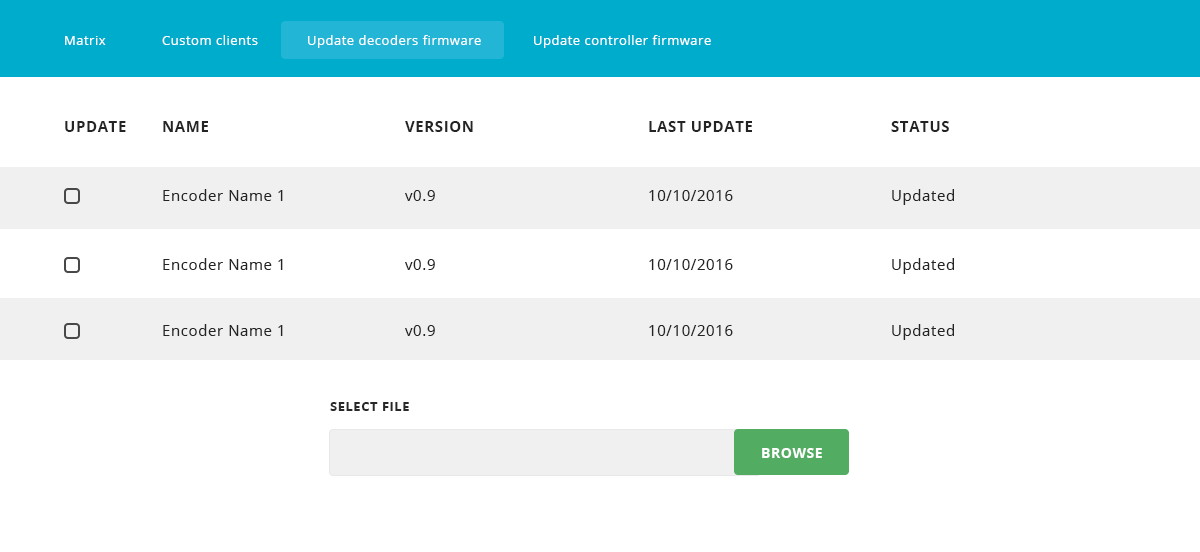
<style>
.page{position:relative;width:1200px;height:552px;background:#ffffff}
.page>*{position:absolute;margin:0}
.t1{font:13px "OpenSans";letter-spacing:0.04em;color:#ffffff}
.t2{font:15px "OpenSans-Bold";letter-spacing:0.04em;color:#242424;text-transform:uppercase}
.t3{font:15px "OpenSans";letter-spacing:0.04em;color:#242424}
.t4{font:13px "OpenSans-Bold";letter-spacing:0.04em;color:#282828;text-transform:uppercase}
.t5{font:14px "OpenSans-Bold";letter-spacing:0.04em;color:#ffffff;text-transform:uppercase}
</style>
<div class="page">
<p class="t1" style="left:65px;top:36px;width:41px;height:9px">Matrix</p>
<p class="t1" style="left:162px;top:35px;width:96px;height:10px">Custom clients</p>
<p class="t1" style="left:308px;top:35px;width:173px;height:13px">Update decoders firmware</p>
<p class="t1" style="left:534px;top:35px;width:177px;height:13px">Update controller firmware</p>
<p class="t2" style="left:65px;top:121px;width:61px;height:11px">Update</p>
<p class="t2" style="left:163px;top:121px;width:45px;height:11px">Name</p>
<p class="t2" style="left:405px;top:121px;width:68px;height:11px">Version</p>
<p class="t2" style="left:649px;top:121px;width:103px;height:11px">Last Update</p>
<p class="t2" style="left:891px;top:121px;width:58px;height:11px">Status</p>
<p class="t3" style="left:163px;top:189px;width:120px;height:12px">Encoder Name 1</p>
<p class="t3" style="left:405px;top:190px;width:30px;height:11px">v0.9</p>
<p class="t3" style="left:649px;top:190px;width:84px;height:11px">10/10/2016</p>
<p class="t3" style="left:892px;top:189px;width:62px;height:16px">Updated</p>
<p class="t3" style="left:163px;top:258px;width:120px;height:12px">Encoder Name 1</p>
<p class="t3" style="left:405px;top:259px;width:30px;height:11px">v0.9</p>
<p class="t3" style="left:649px;top:259px;width:84px;height:11px">10/10/2016</p>
<p class="t3" style="left:892px;top:258px;width:62px;height:16px">Updated</p>
<p class="t3" style="left:163px;top:324px;width:120px;height:12px">Encoder Name 1</p>
<p class="t3" style="left:405px;top:325px;width:30px;height:11px">v0.9</p>
<p class="t3" style="left:649px;top:325px;width:84px;height:11px">10/10/2016</p>
<p class="t3" style="left:892px;top:324px;width:62px;height:16px">Updated</p>
<p class="t4" style="left:330px;top:402px;width:79px;height:9px">Select File</p>
<p class="t5" style="left:762px;top:448px;width:60px;height:10px">browse</p>
</div>
